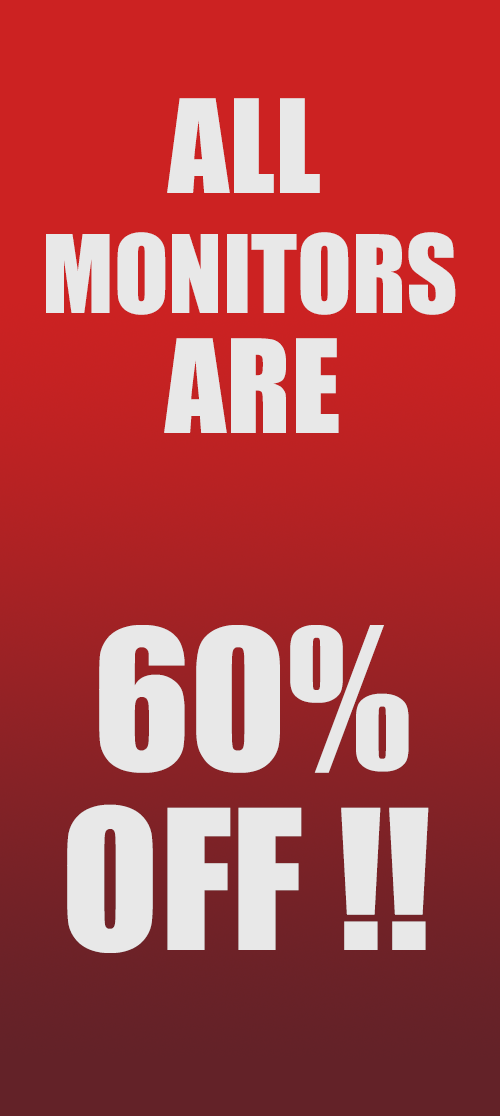
<style>
.page{position:relative;width:500px;height:1116px;background:#cc2222}
.page>*{position:absolute;margin:0}
.t1{font:100px/120px "Impact";color:#e8e8e8}
.t2{font:120px/120px "Impact";color:#e8e8e8}
.t3{font:180px/180px "Impact";color:#e8e8e8}
</style>
<div class="page">
<p class="t1" style="left:46px;top:98px;width:410px;height:335px"><span class="t2">    ALL<br></span> MONITORS<br>        <span class="t2">ARE</span></p>
<p class="t3" style="left:67px;top:625px;width:362px;height:328px"><span class="t2">       <br><br></span>  60%<br> OFF !!</p>
</div>
